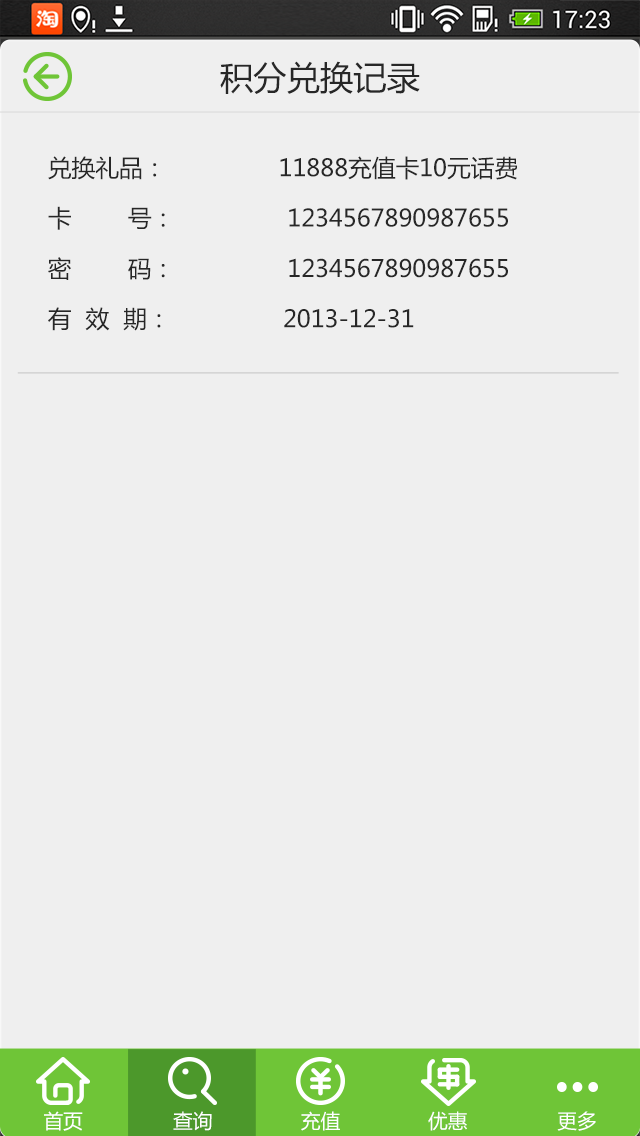
<style>
.page{position:relative;width:640px;height:1136px;background:#efefef}
.page>*{position:absolute;margin:0}
.t1{font:33.3px "MicrosoftYaHei";color:#272727}
.t2{font:23.7px/50.4px "MicrosoftYaHei";color:#272727}
.t3{font:19.8px "MicrosoftYaHei";color:#ffffff}
</style>
<div class="page">
<p class="t1" style="left:220px;top:61px;width:200px;height:33px">积分兑换记录</p>
<p class="t2" style="left:48px;top:156px;width:469px;height:175px">兑换礼品：                11888充值卡10元话费<br>卡        号：                1234567890987655<br>密        码：                1234567890987655<br>有  效  期：                2013-12-31</p>
<p class="t3" style="left:44px;top:1111px;width:39px;height:20px">首页</p>
<p class="t3" style="left:173px;top:1111px;width:39px;height:20px">查询</p>
<p class="t3" style="left:301px;top:1111px;width:39px;height:20px">充值</p>
<p class="t3" style="left:428px;top:1111px;width:39px;height:20px">优惠</p>
<p class="t3" style="left:557px;top:1111px;width:39px;height:20px">更多</p>
</div>
